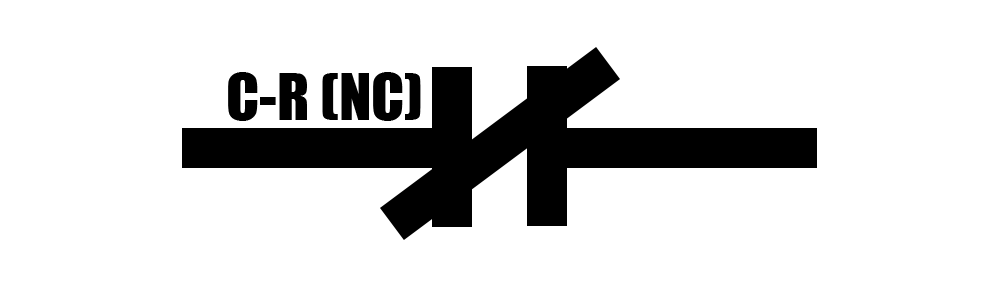
<style>
.page{position:relative;width:1000px;height:300px;background:#ffffff}
.page>*{position:absolute;margin:0}
.t1{font:60px "Impact";color:#000000}
</style>
<div class="page">
<p class="t1" style="left:228px;top:72px;width:193px;height:49px">C-R (NC)</p>
</div>
